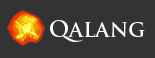
<style>
.page{position:relative;width:155px;height:58px;background:#333333}
.page>*{position:absolute;margin:0}
.t1{font:22.2px "TrajanPro-Bold";color:#ffffff}
</style>
<div class="page">
<p class="t1" style="left:50px;top:20px;width:95px;height:22px">Qalang</p>
</div>
